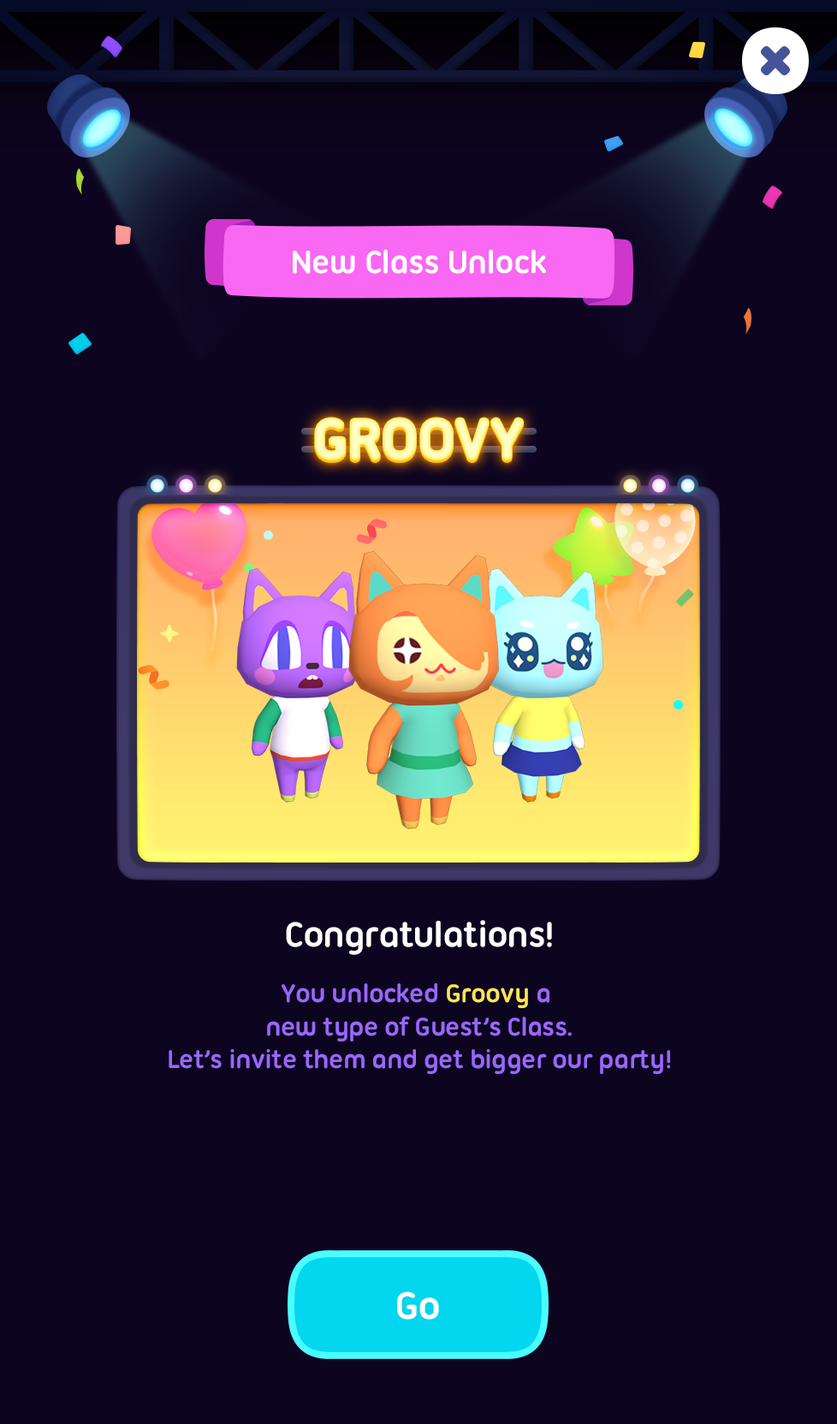
<style>
.page{position:relative;width:837px;height:1424px;background:#0d0420}
.page>*{position:absolute;margin:0}
.t1{font:34.2px "UbuntuTitling-Bold";letter-spacing:-0.025em;color:#ffffff}
.t2{font:59.9px "UbuntuTitling-Bold";letter-spacing:-0.04em;text-transform:uppercase;font-weight:bold}
.t3{font:59.9px "UbuntuTitling-Bold";letter-spacing:-0.04em;color:#fdfcb8;text-transform:uppercase;font-weight:bold}
.t4{font:37.7px "UbuntuTitling-Bold";letter-spacing:-0.025em;color:#ffffff}
.t5{font:27.4px "UbuntuTitling-Bold";letter-spacing:-0.025em;color:#9967ff}
.t6{font:27.4px "UbuntuTitling-Bold";letter-spacing:-0.025em;color:#ffe552}
.t7{font:41.1px "UbuntuTitling-Bold";letter-spacing:-0.025em;color:#ffffff}
</style>
<div class="page">
<p class="t1" style="left:293px;top:249px;width:253px;height:25px">New Class Unlock</p>
<p class="t2" style="left:315px;top:420px;width:209px;height:42px">Groovy</p>
<p class="t3" style="left:315px;top:418px;width:209px;height:42px">Groovy</p>
<p class="t4" style="left:286px;top:920px;width:266px;height:35px">Congratulations!</p>
<p class="t5" style="left:169px;top:984px;width:501px;height:90px;text-align:center">You unlocked <span class="t6">Groovy </span>a <br>new type of Guest’s Class.<br>Let’s invite them and get bigger our party!</p>
<p class="t7" style="left:397px;top:1292px;width:42px;height:28px">Go</p>
</div>
